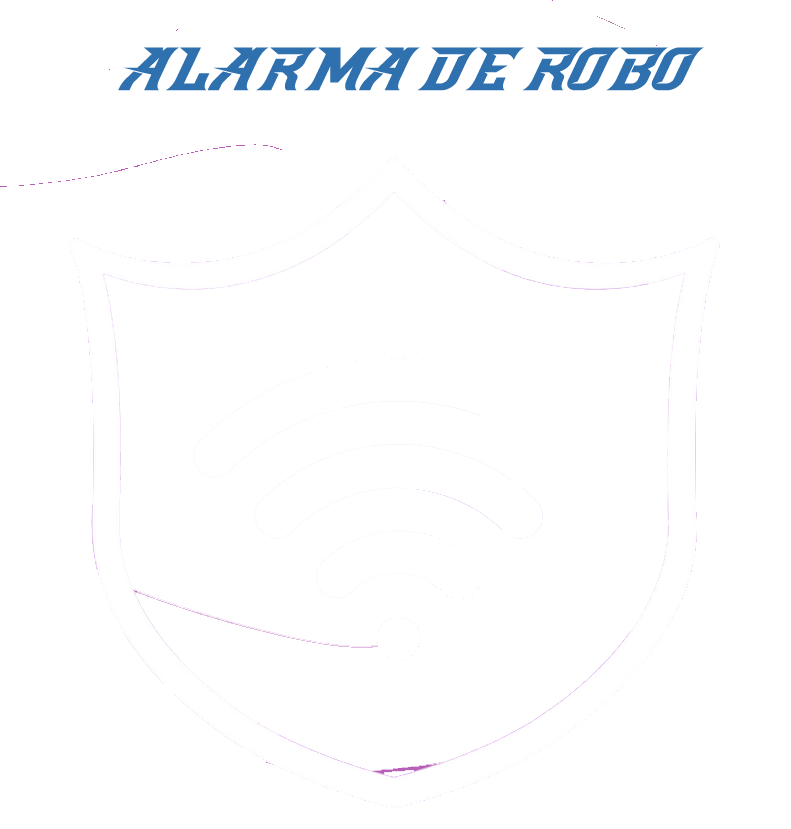
<style>
.page{position:relative;width:791px;height:829px;background:#ffffff}
.page>*{position:absolute;margin:0}
.t1{font:48px "SpeedBeastFREE";color:#2f70af}
</style>
<div class="page">
<p class="t1" style="left:118px;top:47px;width:586px;height:44px">ALARMA DE ROBO</p>
</div>
